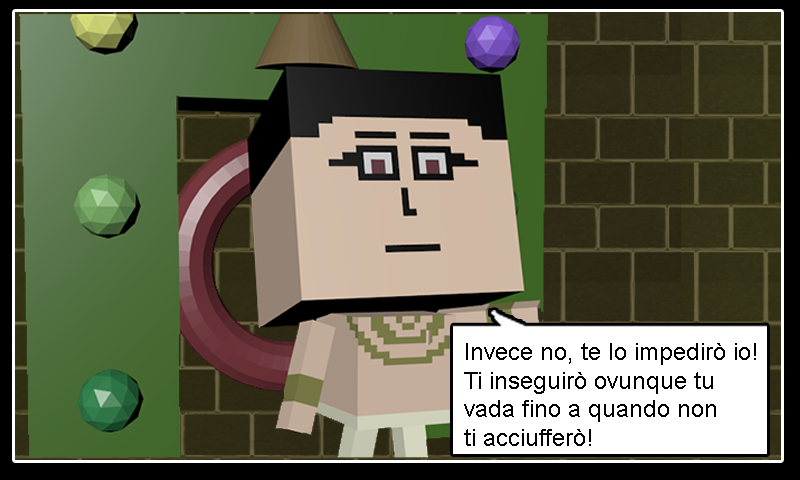
<style>
.page{position:relative;width:800px;height:480px}
.page>*{position:absolute;margin:0}
.t1{font:24px "ArialMT";color:#000000}
</style>
<div class="page">
<p class="t1" style="left:464px;top:343px;width:292px;height:103px">Invece no, te lo impedirò io!<br>Ti inseguirò ovunque tu<br>vada fino a quando non<br>ti acciufferò!</p>
</div>
